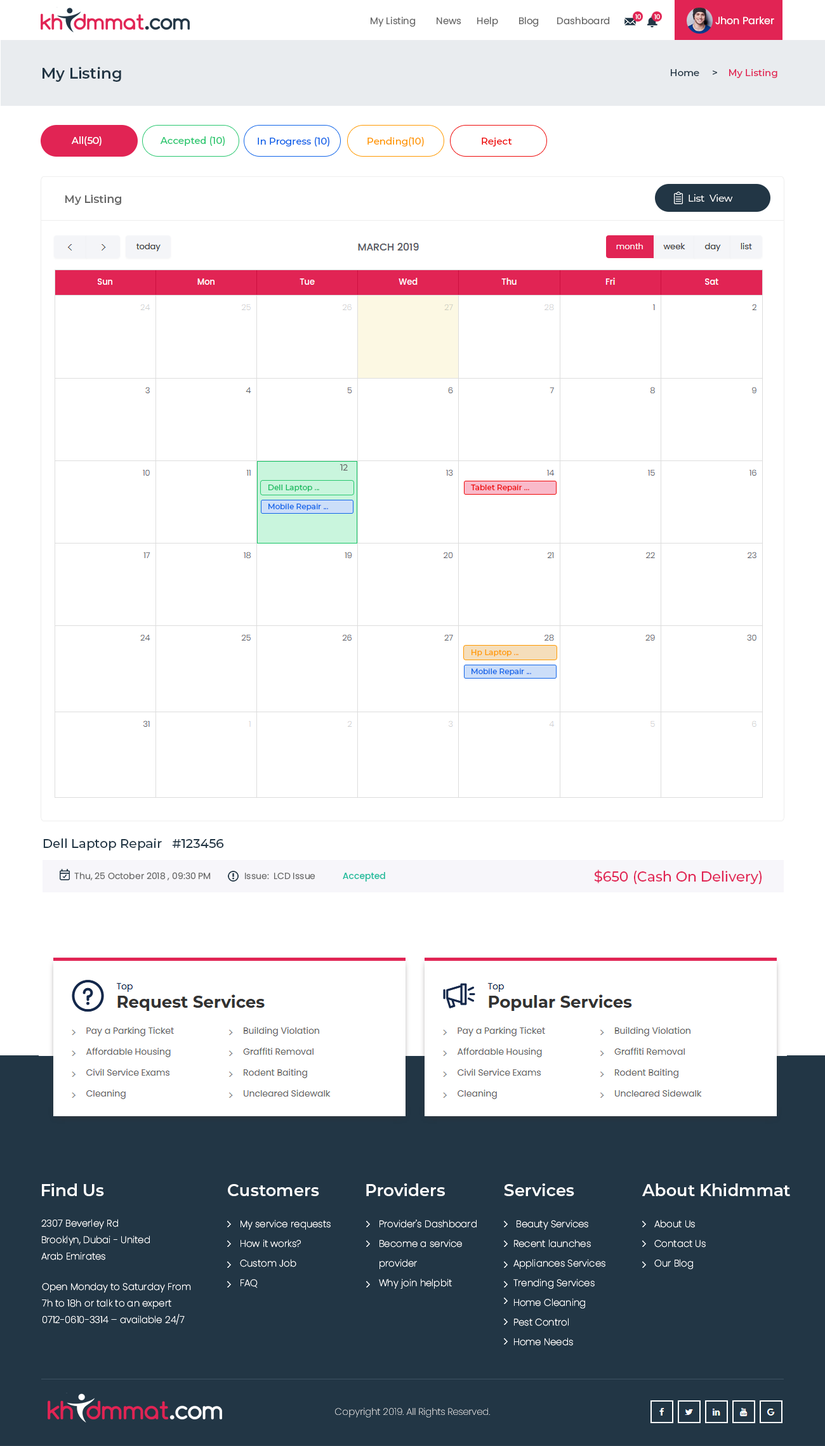
<style>
.page{position:relative;width:825px;height:1446px;background:#ffffff}
.page>*{position:absolute;margin:0}
.t1{font:9.5px "Poppins-Regular";color:#666666}
.t2{font:8.9px "Poppins-Regular";color:#666666}
.t3{font:10.1px "Poppins-Regular";color:#ffffff}
.t4{font:6.3px "Poppins-Regular";color:#ffffff}
.t5{font:15.2px "Montserrat-SemiBold";color:#223645}
.t6{font:9.5px "Montserrat-Medium";color:#223645}
.t7{font:9.5px "Montserrat-Medium";color:#05315e}
.t8{font:9.5px "Montserrat-Medium";color:#e12454}
.t9{font:9.5px "Montserrat-Medium";color:#ffffff}
.t10{font:9.5px "Montserrat-Medium";color:#28c76f}
.t11{font:9.5px "Montserrat-Medium";color:#1165e9}
.t12{font:9.5px "Montserrat-Medium";color:#ff9900}
.t13{font:9.5px "Montserrat-Medium";color:#ee0909}
.t14{font:10.8px "Montserrat-SemiBold";color:#666666}
.t15{font:9.5px "Montserrat-Regular";color:#ffffff}
.t16{font:8.2px "Montserrat-Regular";color:#666666}
.t17{font:7.6px "Montserrat-Medium";color:#17bb60}
.t18{font:7.6px "Montserrat-Medium";color:#ee0909}
.t19{font:7.6px "Montserrat-Medium";color:#1165e9}
.t20{font:7.6px "Montserrat-Medium";color:#ff9900}
.t21{font:12.7px "Montserrat-Medium";color:#223645}
.t22{font:14px "Montserrat-Medium";color:#e12454}
.t23{font:8.9px "Poppins-Medium";color:#1abc9c}
.t24{font:16.5px "Montserrat-SemiBold";color:#ffffff}
.t25{font:9.5px/16.5px "Poppins-ExtraLight";color:#ffffff}
.t26{font:9.5px/19.7px "Poppins-ExtraLight";color:#ffffff}
.t27{font:9.5px "Poppins-ExtraLight"}
</style>
<div class="page">
<p class="t1" style="left:370px;top:16px;width:404px;height:11px"><span class="t2">       </span>         My Listing        News      Help        Blog       Dashboard                                          <span class="t3">Jhon Parker</span></p>
<p class="t4" style="left:635px;top:14px;width:6px;height:6px">10</p>
<p class="t4" style="left:654px;top:14px;width:6px;height:6px">10</p>
<p class="t5" style="left:42px;top:67px;width:79px;height:15px">My Listing</p>
<p class="t6" style="left:670px;top:69px;width:107px;height:9px"><span class="t7">    </span>Home     &gt;    <span class="t8">My Listing</span></p>
<p class="t9" style="left:71px;top:136px;width:30px;height:10px">All(50)</p>
<p class="t10" style="left:160px;top:136px;width:65px;height:10px">Accepted (10)</p>
<p class="t11" style="left:258px;top:137px;width:71px;height:10px">In Progress (10)</p>
<p class="t12" style="left:367px;top:137px;width:57px;height:10px">Pending(10)</p>
<p class="t13" style="left:481px;top:137px;width:31px;height:10px">Reject</p>
<p class="t14" style="left:65px;top:195px;width:56px;height:10px">My Listing</p>
<p class="t15" style="left:688px;top:194px;width:45px;height:8px">List  View</p>
<p class="t16" style="left:339px;top:464px;width:9px;height:7px">12</p>
<p class="t17" style="left:268px;top:485px;width:51px;height:7px">Dell Laptop ...</p>
<p class="t18" style="left:471px;top:485px;width:58px;height:7px">Tablet Repair ...</p>
<p class="t19" style="left:268px;top:504px;width:60px;height:7px">Mobile Repair ...</p>
<p class="t20" style="left:471px;top:649px;width:47px;height:7px">Hp Laptop ...</p>
<p class="t19" style="left:471px;top:669px;width:60px;height:7px">Mobile Repair ...</p>
<p class="t21" style="left:43px;top:839px;width:181px;height:12px">Dell Laptop Repair   #123456</p>
<p class="t22" style="left:594px;top:870px;width:167px;height:14px">$650 (Cash On Delivery)</p>
<p class="t2" style="left:74px;top:872px;width:311px;height:10px">Thu, 25 October 2018 , 09:30 PM              Issue:  LCD Issue        <span class="t23">Accepted</span></p>
<p class="t24" style="left:42px;top:1184px;width:62px;height:12px">Find Us</p>
<p class="t24" style="left:228px;top:1184px;width:91px;height:12px">Customers</p>
<p class="t24" style="left:366px;top:1184px;width:79px;height:12px">Providers</p>
<p class="t24" style="left:504px;top:1184px;width:70px;height:12px">Services</p>
<p class="t24" style="left:642px;top:1184px;width:148px;height:12px">About Khidmmat</p>
<p class="t25" style="left:41px;top:1219px;width:109px;height:41px">2307 Beverley Rd<br>Brooklyn, Dubai - United Arab Emirates</p>
<p class="t26" style="left:240px;top:1220px;width:90px;height:68px">My service requests<br>    How it works?<br>    Custom Job<br>    FAQ</p>
<p class="t26" style="left:379px;top:1220px;width:97px;height:69px">Provider's Dashboard<br>    Become a service <br>    provider<br>    Why join helpbit</p>
<p class="t26" style="left:513px;top:1220px;width:92px;height:126px">Beauty Services <br>Recent launches <br>Appliances Services Trending Services <br>Home Cleaning <br>Pest Control <br>Home Needs</p>
<p class="t26" style="left:654px;top:1220px;width:51px;height:50px">About Us<br> Contact Us<br> Our Blog</p>
<p class="t25" style="left:42px;top:1283px;width:149px;height:42px">Open Monday to Saturday From 7h to 18h or talk to an expert 0712-0610-3314 – available 24/7</p>
<p class="t27" style="left:335px;top:1407px;width:155px;height:11px">Copyright 2019. All Rights Reserved.</p>
</div>
